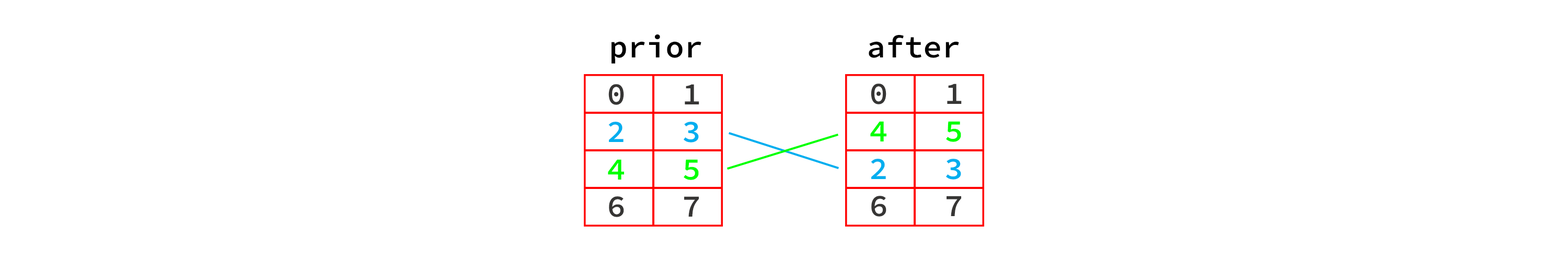
<style>
.page{position:relative;width:1568px;height:261px;background:#ffffff}
.page>*{position:absolute;margin:0}
.t1{font:31.3px "SourceCodeRoman-Semibold";color:#000000}
.t2{font:31.3px "SourceCodeRoman-Semibold";color:#363534}
.t3{font:31.3px "SourceCodeRoman-Semibold";color:#00aeef}
.t4{font:31.3px "SourceCodeRoman-Semibold";color:#00ff00}
</style>
<div class="page">
<p class="t1" style="left:612px;top:34px;width:89px;height:30px">prior</p>
<p class="t1" style="left:869px;top:35px;width:90px;height:23px">after</p>
<p class="t2" style="left:608px;top:84px;width:91px;height:133px;text-align:center">0   1<br><span class="t3">2   3<br></span><span class="t4">4   5<br></span>6   7</p>
<p class="t2" style="left:870px;top:84px;width:92px;height:133px;text-align:center">0   1<br><span class="t4">4   5<br></span><span class="t3">2   3<br></span>6   7</p>
</div>
